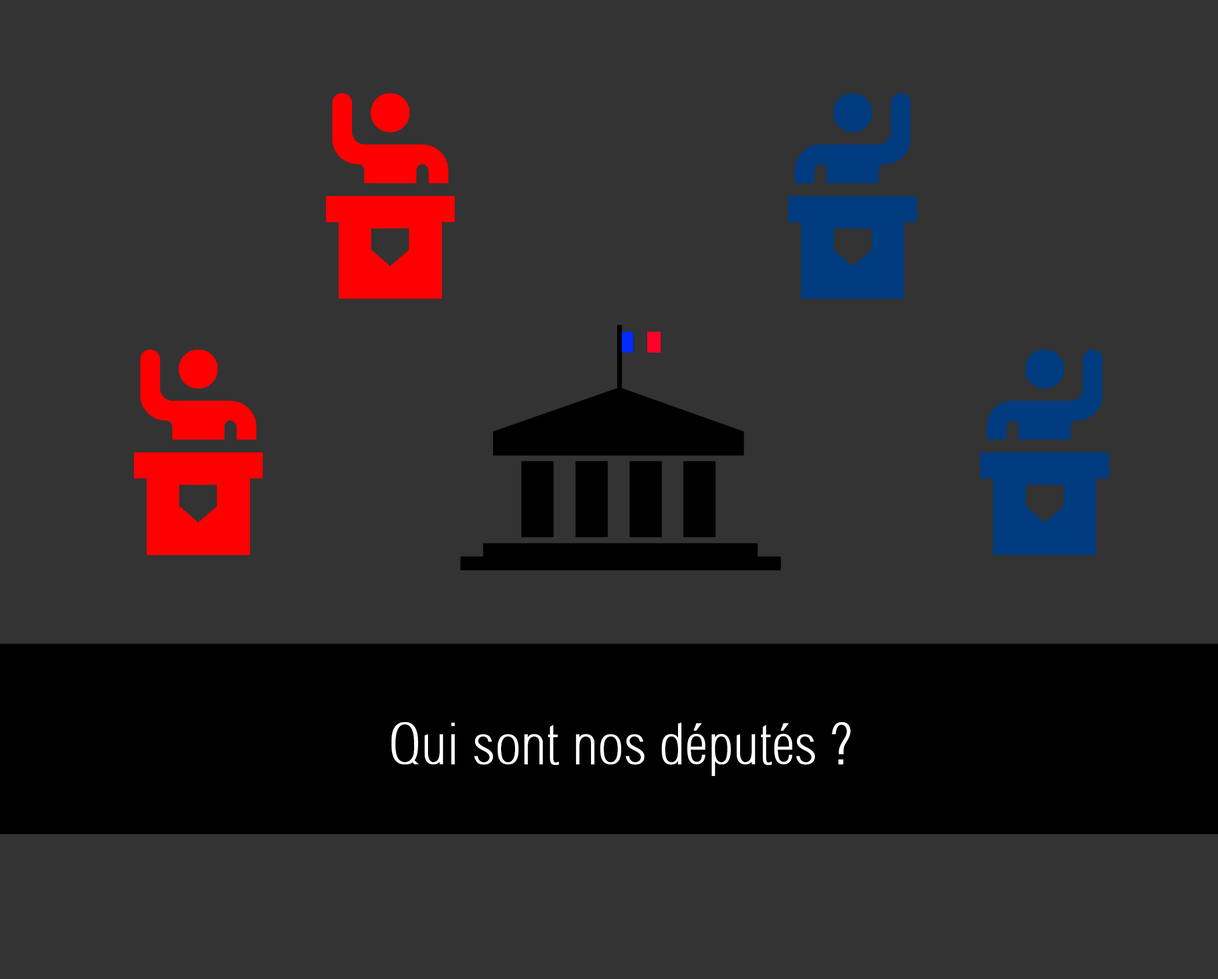
<style>
.page{position:relative;width:1218px;height:979px;background:#333333}
.page>*{position:absolute;margin:0}
.t1{font:58px "Sertig";color:#ffffff}
</style>
<div class="page">
<p class="t1" style="left:391px;top:722px;width:460px;height:54px">Qui sont nos députés ?</p>
</div>
